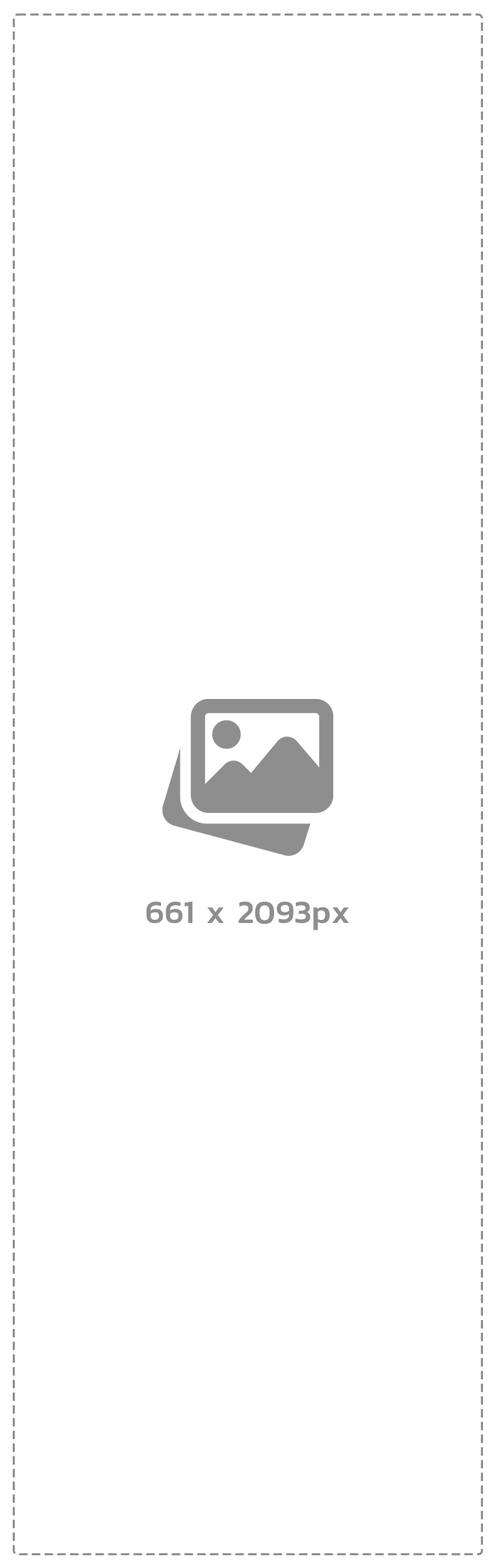
<style>
.page{position:relative;width:495px;height:1568px;background:#ffffff}
.page>*{position:absolute;margin:0}
.t1{font:32.8px "Kanit-Medium";color:#8e8e8e}
</style>
<div class="page">
<p class="t1" style="left:146px;top:901px;width:203px;height:29px">661 x 2093px</p>
</div>
